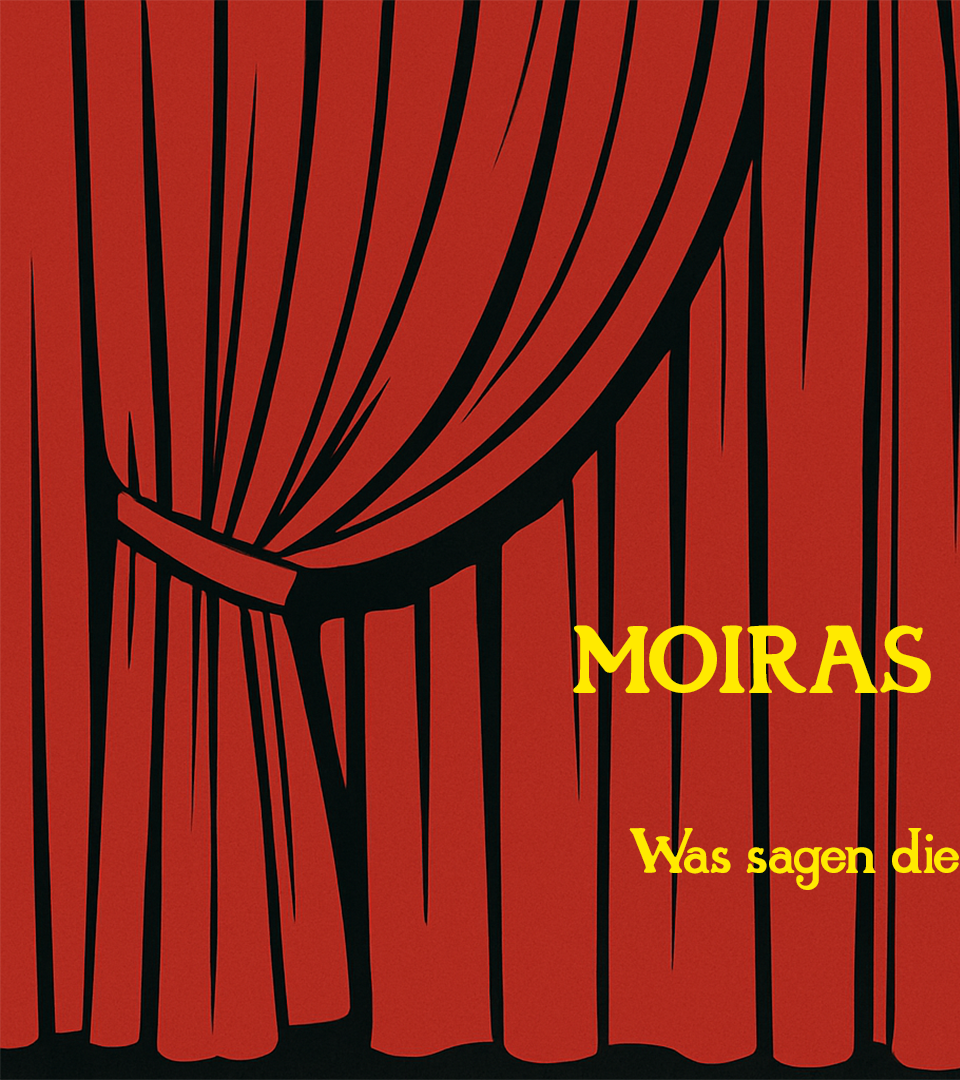
<style>
.page{position:relative;width:960px;height:1080px}
.page>*{position:absolute;margin:0}
.t1{font:60px "Tarotheque";color:#ffea00}
.t2{font:90px "Tarotheque";color:#ffea00}
</style>
<div class="page">
<p class="t1" style="left:573px;top:625px;width:386px;height:265px;text-align:center"><span class="t2">          MOIRAS  <br><br></span>Was sagen die</p>
</div>
